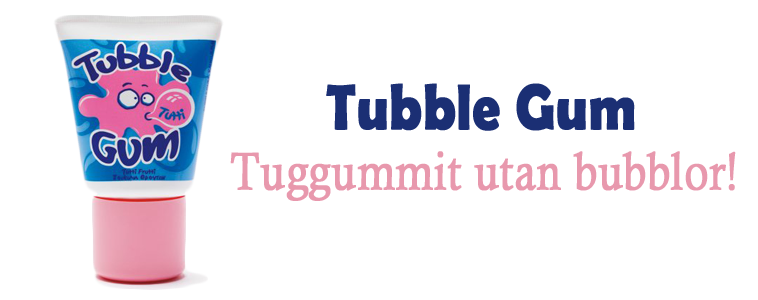
<style>
.page{position:relative;width:758px;height:300px;background:#ffffff}
.page>*{position:absolute;margin:0}
.t1{font:64.8px "BerlinSansFBDemi-Bold";color:#1b2f74;font-weight:bold;scale:0.83 1}
.t2{font:52.8px "CalistoMT";color:#e898ad;font-weight:bold;scale:0.83 1}
</style>
<div class="page">
<p class="t1" style="left:326px;top:83px;width:309px;height:48px">Tubble Gum</p>
<p class="t2" style="left:230px;top:151px;width:506px;height:50px">Tuggummit utan bubblor!</p>
</div>
